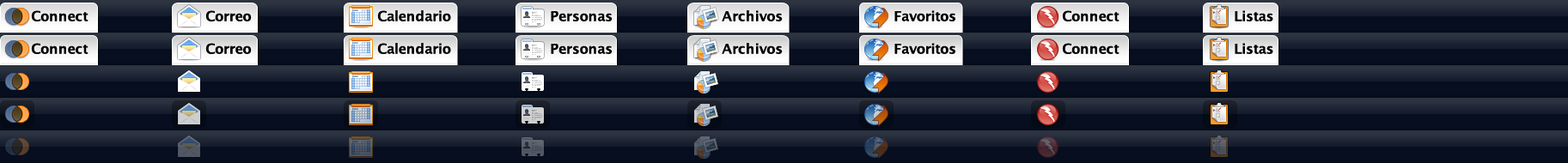
<style>
.page{position:relative;width:1568px;height:163px;background:#060e1f}
.page>*{position:absolute;margin:0}
.t1{font:13.7px "LucidaGrande-Bold";letter-spacing:-0.01em;color:#000000}
</style>
<div class="page">
<p class="t1" style="left:31px;top:10px;width:57px;height:11px">Connect</p>
<p class="t1" style="left:205px;top:10px;width:47px;height:11px">Correo</p>
<p class="t1" style="left:377px;top:10px;width:74px;height:11px">Calendario</p>
<p class="t1" style="left:551px;top:11px;width:62px;height:10px">Personas</p>
<p class="t1" style="left:722px;top:10px;width:61px;height:11px">Archivos</p>
<p class="t1" style="left:894px;top:10px;width:61px;height:11px">Favoritos</p>
<p class="t1" style="left:1062px;top:10px;width:58px;height:11px">Connect</p>
<p class="t1" style="left:1235px;top:10px;width:38px;height:11px">Listas</p>
<p class="t1" style="left:31px;top:43px;width:57px;height:11px">Connect</p>
<p class="t1" style="left:205px;top:43px;width:47px;height:11px">Correo</p>
<p class="t1" style="left:377px;top:43px;width:74px;height:11px">Calendario</p>
<p class="t1" style="left:551px;top:44px;width:62px;height:10px">Personas</p>
<p class="t1" style="left:722px;top:43px;width:61px;height:11px">Archivos</p>
<p class="t1" style="left:894px;top:43px;width:61px;height:11px">Favoritos</p>
<p class="t1" style="left:1062px;top:43px;width:58px;height:11px">Connect</p>
<p class="t1" style="left:1235px;top:43px;width:38px;height:11px">Listas</p>
</div>
